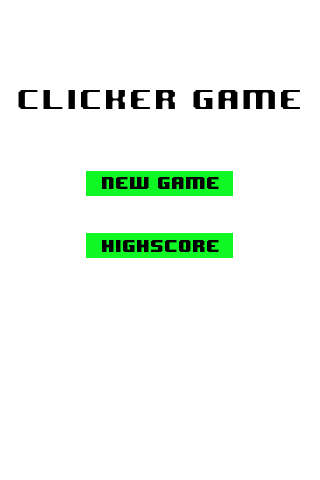
<style>
.page{position:relative;width:320px;height:480px;background:#ffffff}
.page>*{position:absolute;margin:0}
.t1{font:25px "8BITWONDERNominal";color:#000000}
.t2{font:14px "8BITWONDERNominal";color:#000000}
</style>
<div class="page">
<p class="t1" style="left:17px;top:89px;width:284px;height:21px">Clicker Game</p>
<p class="t2" style="left:102px;top:177px;width:117px;height:12px">new game</p>
<p class="t2" style="left:102px;top:240px;width:117px;height:12px">highscore</p>
</div>
